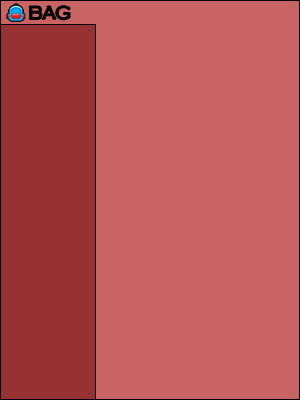
<style>
.page{position:relative;width:300px;height:400px;background:#c86464}
.page>*{position:absolute;margin:0}
.t1{font:18.7px "CopperplateGothic-Light";color:#000707}
</style>
<div class="page">
<p class="t1" style="left:29px;top:6px;width:41px;height:14px">BAG</p>
</div>
